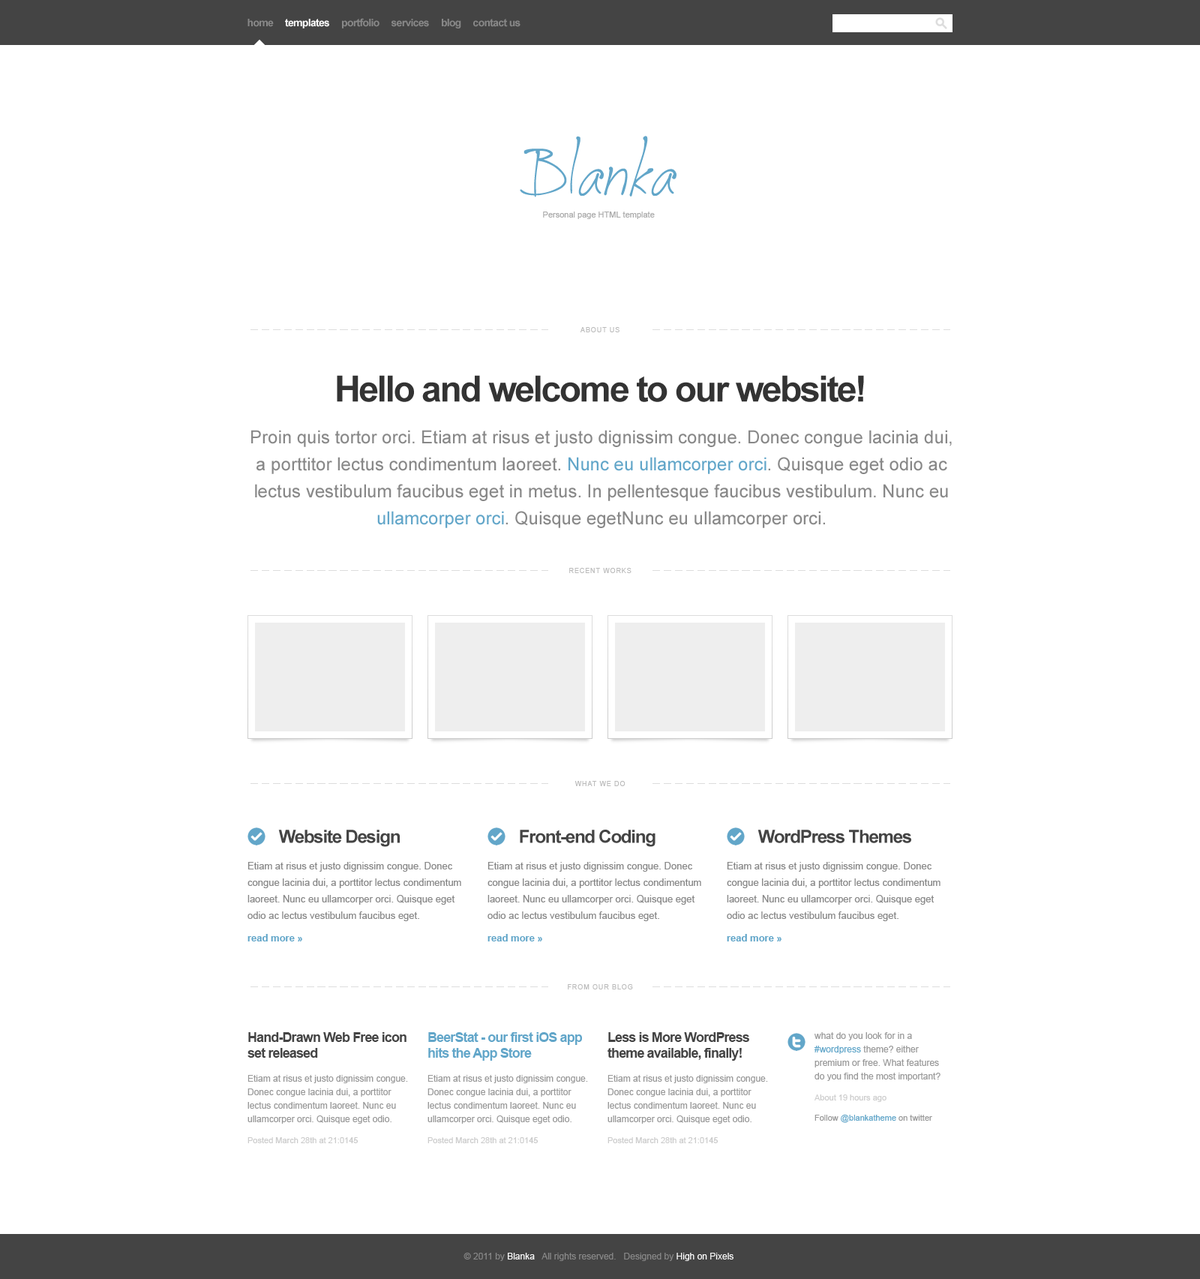
<style>
.page{position:relative;width:1200px;height:1279px;background:#ffffff}
.page>*{position:absolute;margin:0}
.t1{font:10.5px "Arial-BoldMT";letter-spacing:-0.05em;color:#888888}
.t2{font:10.5px "Arial-BoldMT";letter-spacing:-0.05em;color:#ffffff}
.t3{font:91.5px "JellykaCuttyCupcakes";color:#62a6c9}
.t4{font:8.2px "ArialMT";color:#aaaaaa}
.t5{font:6.8px "ArialMT";letter-spacing:0.1em;color:#bbbbbb;text-transform:uppercase}
.t6{font:36px "Arial-BoldMT";letter-spacing:-0.05em;color:#333333}
.t7{font:18px/27px "ArialMT";color:#888888}
.t8{font:18px/27px "ArialMT";color:#62a6c9}
.t9{font:18px "Arial-BoldMT";letter-spacing:-0.05em;color:#444444}
.t10{font:9.8px/16.5px "ArialMT";color:#888888}
.t11{font:9.8px/22.5px "Arial-BoldMT";color:#62a6c9}
.t12{font:13.5px "Arial-BoldMT";letter-spacing:-0.05em;color:#444444}
.t13{font:13.5px "Arial-BoldMT";letter-spacing:-0.05em;color:#62a6c9}
.t14{font:9px/13.5px "ArialMT";color:#999999}
.t15{font:9px/13.5px "ArialMT";color:#62a6c9}
.t16{font:8.2px "ArialMT";color:#cccccc}
.t17{font:8.2px "ArialMT";color:#62a6c9}
.t18{font:8.2px "ArialMT";color:#999999}
.t19{font:8.2px "Arial-BoldMT";color:#cccccc}
.t20{font:9px "ArialMT";color:#888888}
.t21{font:9px "ArialMT";color:#ffffff}
</style>
<div class="page">
<p class="t1" style="left:248px;top:18px;width:272px;height:10px">home     <span class="t2">templates</span>     portfolio     services     blog     contact us</p>
<p class="t3" style="left:520px;top:136px;width:156px;height:61px">Blanka</p>
<p class="t4" style="left:543px;top:212px;width:112px;height:7px">Personal page HTML template</p>
<p class="t5" style="left:580px;top:327px;width:40px;height:5px">About us</p>
<p class="t6" style="left:337px;top:375px;width:527px;height:27px">Hello and welcome to our website!</p>
<p class="t7" style="left:251px;top:430px;width:701px;height:98px;text-align:center">Proin quis tortor orci. Etiam at risus et justo dignissim congue. Donec congue lacinia dui, a porttitor lectus condimentum laoreet. <span class="t8">Nunc eu ullamcorper orci</span>. Quisque eget odio ac lectus vestibulum faucibus eget in metus. In pellentesque faucibus vestibulum. Nunc eu <span class="t8">ullamcorper orci</span>. Quisque egetNunc eu ullamcorper orci.</p>
<p class="t5" style="left:569px;top:568px;width:63px;height:5px">recent works</p>
<p class="t5" style="left:574px;top:781px;width:52px;height:5px">what we do</p>
<p class="t9" style="left:278px;top:830px;width:122px;height:17px">Website Design</p>
<p class="t9" style="left:520px;top:830px;width:136px;height:17px">Front-end Coding</p>
<p class="t9" style="left:758px;top:830px;width:153px;height:13px">WordPress Themes</p>
<p class="t10" style="left:248px;top:862px;width:213px;height:79px">Etiam at risus et justo dignissim congue. Donec congue lacinia dui, a porttitor lectus condimentum laoreet. Nunc eu ullamcorper orci. Quisque eget odio ac lectus vestibulum faucibus eget.<br><span class="t11">read more »</span></p>
<p class="t10" style="left:488px;top:862px;width:213px;height:79px">Etiam at risus et justo dignissim congue. Donec congue lacinia dui, a porttitor lectus condimentum laoreet. Nunc eu ullamcorper orci. Quisque eget odio ac lectus vestibulum faucibus eget.<br><span class="t11">read more »</span></p>
<p class="t10" style="left:727px;top:862px;width:213px;height:79px">Etiam at risus et justo dignissim congue. Donec congue lacinia dui, a porttitor lectus condimentum laoreet. Nunc eu ullamcorper orci. Quisque eget odio ac lectus vestibulum faucibus eget.<br><span class="t11">read more »</span></p>
<p class="t5" style="left:568px;top:984px;width:65px;height:5px">from our blog</p>
<p class="t12" style="left:248px;top:1032px;width:158px;height:26px">Hand-Drawn Web Free icon set released</p>
<p class="t13" style="left:428px;top:1032px;width:154px;height:28px">BeerStat - our first iOS app hits the App Store</p>
<p class="t12" style="left:608px;top:1032px;width:141px;height:28px">Less is More WordPress theme available, finally!</p>
<p class="t14" style="left:814px;top:1032px;width:126px;height:49px">what do you look for in a <br><span class="t15"> #wordpress </span>theme? either <br> premium or free. What features<br> do you find the most important?</p>
<p class="t14" style="left:248px;top:1075px;width:160px;height:49px">Etiam at risus et justo dignissim congue. Donec congue lacinia dui, a porttitor lectus condimentum laoreet. Nunc eu ullamcorper orci. Quisque eget odio.</p>
<p class="t14" style="left:428px;top:1075px;width:160px;height:49px">Etiam at risus et justo dignissim congue. Donec congue lacinia dui, a porttitor lectus condimentum laoreet. Nunc eu ullamcorper orci. Quisque eget odio.</p>
<p class="t14" style="left:608px;top:1075px;width:160px;height:49px">Etiam at risus et justo dignissim congue. Donec congue lacinia dui, a porttitor lectus condimentum laoreet. Nunc eu ullamcorper orci. Quisque eget odio.</p>
<p class="t16" style="left:814px;top:1094px;width:72px;height:8px">About 19 hours ago</p>
<p class="t17" style="left:814px;top:1114px;width:118px;height:9px"><span class="t18">Follow </span>@blankatheme<span class="t18"> on twitter</span></p>
<p class="t16" style="left:248px;top:1137px;width:110px;height:6px">Posted March 28th at 21:01<span class="t19">45</span></p>
<p class="t16" style="left:428px;top:1137px;width:110px;height:6px">Posted March 28th at 21:01<span class="t19">45</span></p>
<p class="t16" style="left:608px;top:1137px;width:110px;height:6px">Posted March 28th at 21:01<span class="t19">45</span></p>
<p class="t20" style="left:464px;top:1252px;width:270px;height:9px">© 2011 by <span class="t21">Blanka</span>   All rights reserved.   Designed by <span class="t21">High on Pixels</span></p>
</div>
